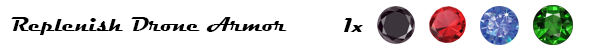
<style>
.page{position:relative;width:600px;height:50px;background:#ffffff}
.page>*{position:absolute;margin:0}
.t1{font:20.8px "Magneto-Bold";color:#000000}
</style>
<div class="page">
<p class="t1" style="left:11px;top:17px;width:276px;height:18px">Replenish Drone Armor</p>
<p class="t1" style="left:344px;top:18px;width:20px;height:14px">1x</p>
</div>
